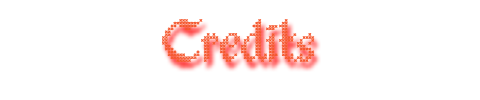
<style>
.page{position:relative;width:480px;height:100px;background:#ffffff}
.page>*{position:absolute;margin:0}
.t1{font:60px "StitchWarrior";letter-spacing:-0.025em;color:#f4572d}
</style>
<div class="page">
<p class="t1" style="left:162px;top:19px;width:153px;height:43px">Credits</p>
</div>
